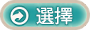
<style>
.page{position:relative;width:90px;height:30px}
.page>*{position:absolute;margin:0}
.t1{font:19px "FutoGoB101Pr5-Bold";letter-spacing:-0.04em;color:#ffffff}
</style>
<div class="page">
<p class="t1" style="left:36px;top:7px;width:37px;height:18px">選擇</p>
</div>
